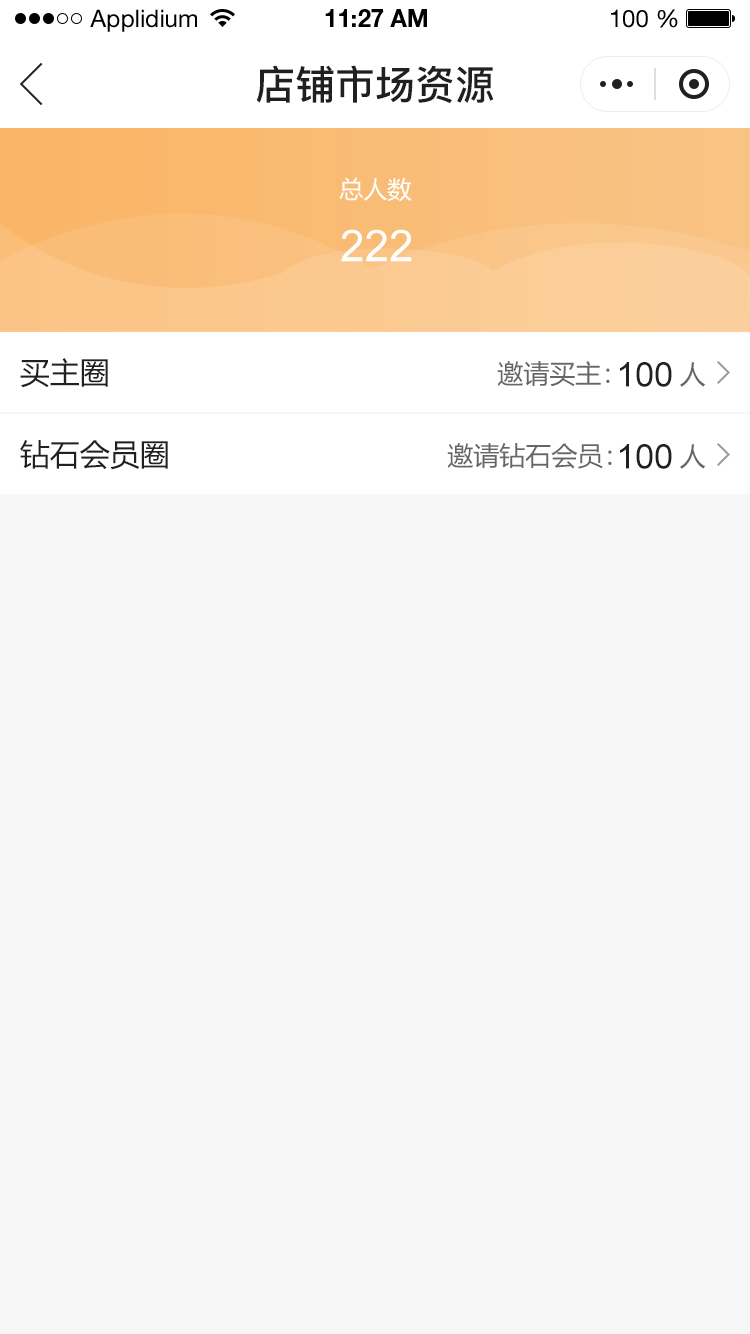
<style>
.page{position:relative;width:750px;height:1334px;background:#f7f7f7}
.page>*{position:absolute;margin:0}
.t1{font:24px "HelveticaNeueLTStd-Roman";color:#000000}
.t2{font:24px "HelveticaNeueLTStd-Bd";color:#000000}
.t3{font:40px "PingFang-SC-Bold";color:#202020;text-transform:uppercase}
.t4{font:24px "MicrosoftYaHei";color:#ffffff;text-transform:uppercase}
.t5{font:44px "ArialMT";color:#ffffff;text-transform:uppercase}
.t6{font:30px "MicrosoftYaHei";color:#202020;text-transform:uppercase}
.t7{font:26px "MicrosoftYaHei";color:#666666;text-transform:uppercase}
.t8{font:34px "ArialMT";color:#202020;text-transform:uppercase}
</style>
<div class="page">
<p class="t1" style="left:90px;top:9px;width:107px;height:23px">Applidium</p>
<p class="t2" style="left:325px;top:9px;width:102px;height:18px">11:27 AM</p>
<p class="t1" style="left:611px;top:9px;width:67px;height:19px">100 %</p>
<p class="t3" style="left:256px;top:65px;width:238px;height:39px">店铺市场资源</p>
<p class="t4" style="left:339px;top:177px;width:73px;height:25px">总人数</p>
<p class="t5" style="left:341px;top:229px;width:71px;height:33px">222</p>
<p class="t6" style="left:20px;top:358px;width:88px;height:30px">买主圈</p>
<p class="t7" style="left:497px;top:361px;width:113px;height:26px">邀请买主：</p>
<p class="t8" style="left:620px;top:362px;width:52px;height:25px">100</p>
<p class="t7" style="left:680px;top:362px;width:26px;height:25px">人</p>
<p class="t6" style="left:20px;top:440px;width:148px;height:30px">钻石会员圈</p>
<p class="t7" style="left:447px;top:443px;width:165px;height:26px">邀请钻石会员：</p>
<p class="t8" style="left:620px;top:444px;width:52px;height:25px">100</p>
<p class="t7" style="left:680px;top:444px;width:26px;height:25px">人</p>
</div>
